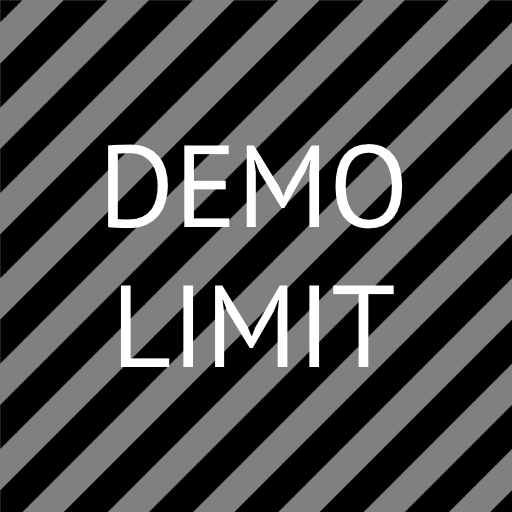
<style>
.page{position:relative;width:512px;height:512px;background:#000000}
.page>*{position:absolute;margin:0}
.t1{font:116.5px "MyriadPro-Regular";color:#ffffff}
</style>
<div class="page">
<p class="t1" style="left:108px;top:144px;width:295px;height:224px;text-align:center">DEMO<br>LIMIT</p>
</div>
